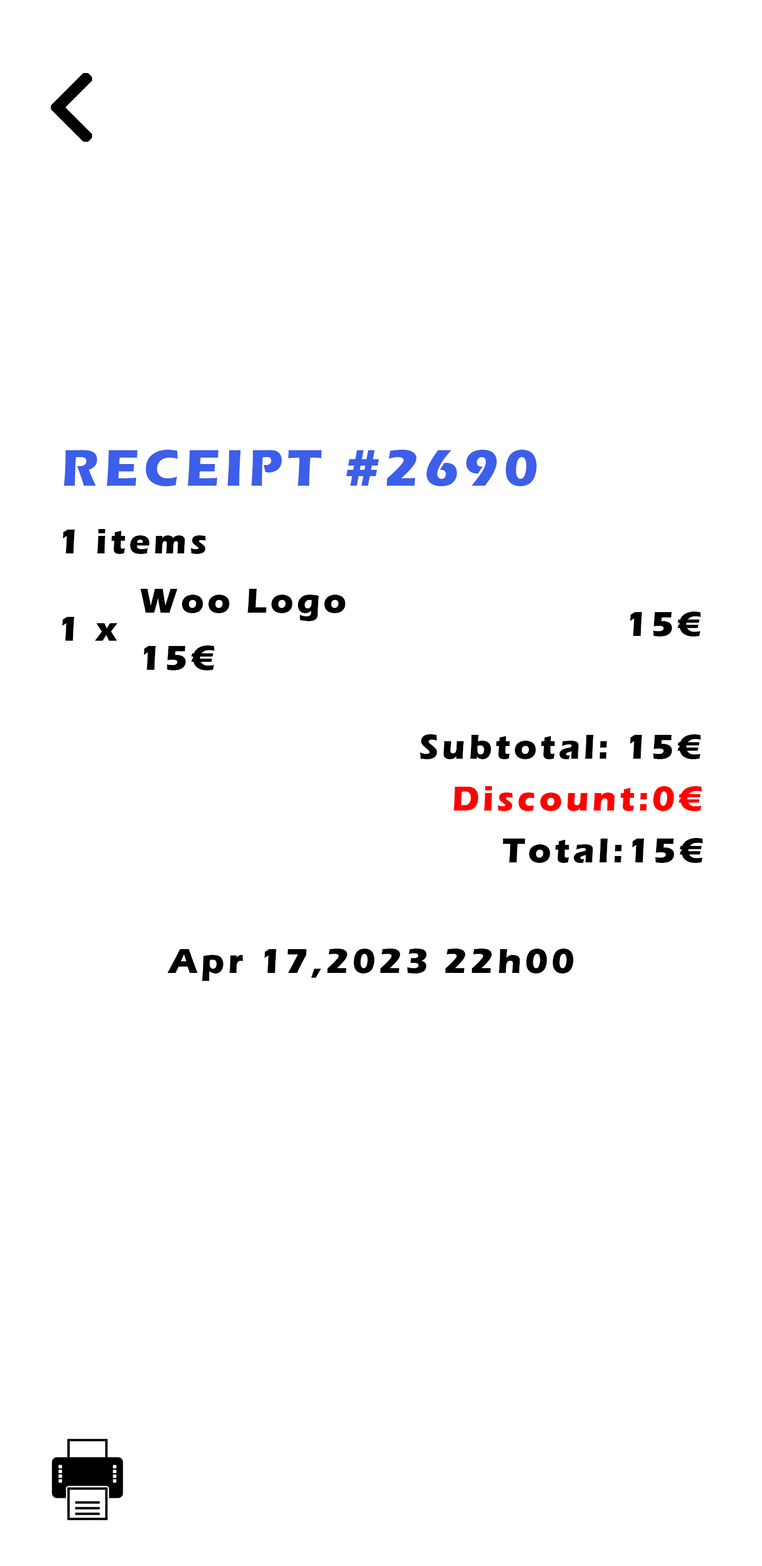
<style>
.page{position:relative;width:762px;height:1566px;background:#ffffff}
.page>*{position:absolute;margin:0}
.t1{font:52.9px "ErasITC-Bold";letter-spacing:0.1em;color:#3d5ee9}
.t2{font:35.3px "ErasITC-Bold";letter-spacing:0.1em;color:#000000}
.t3{font:35.3px "ErasITC-Bold";letter-spacing:0.1em;color:#ff0000}
</style>
<div class="page">
<p class="t1" style="left:63px;top:450px;width:473px;height:36px">RECEIPT #2690</p>
<p class="t2" style="left:62px;top:529px;width:144px;height:25px">1 items</p>
<p class="t2" style="left:140px;top:589px;width:205px;height:32px">Woo Logo</p>
<p class="t2" style="left:62px;top:617px;width:55px;height:24px">1 x</p>
<p class="t2" style="left:629px;top:611px;width:72px;height:25px">15€</p>
<p class="t2" style="left:143px;top:645px;width:72px;height:25px">15€</p>
<p class="t2" style="left:419px;top:734px;width:282px;height:25px">Subtotal: 15€</p>
<p class="t3" style="left:453px;top:786px;width:249px;height:25px">Discount:0€</p>
<p class="t2" style="left:502px;top:838px;width:201px;height:25px">Total:15€</p>
<p class="t2" style="left:167px;top:948px;width:406px;height:33px">Apr 17,2023 22h00</p>
</div>
